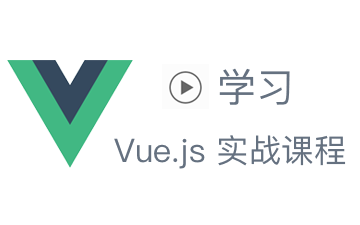
<style>
.page{position:relative;width:360px;height:225px;background:#ffffff}
.page>*{position:absolute;margin:0}
.t1{font:39.2px "PingFangSC-Regular";color:#657180}
.t2{font:32.6px "PingFangSC-Regular";color:#657180}
</style>
<div class="page">
<p class="t1" style="left:219px;top:68px;width:71px;height:37px">学习</p>
<p class="t2" style="left:114px;top:135px;width:232px;height:34px">Vue.js 实战课程</p>
</div>
